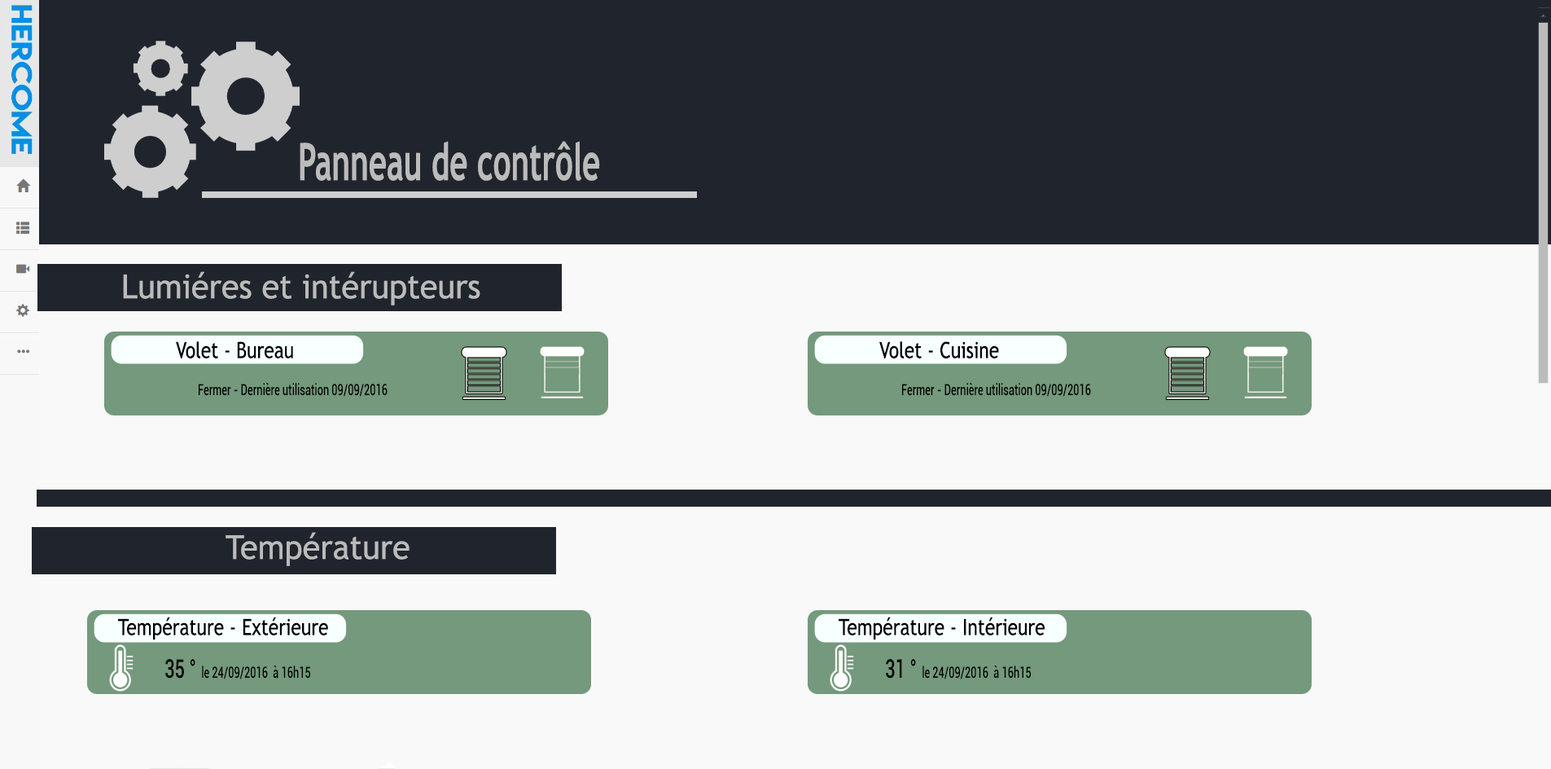
<style>
.page{position:relative;width:1551px;height:769px;background:#f9f9f9}
.page>*{position:absolute;margin:0}
.t1{font:51.5px "TrebuchetMS-Bold";color:#bbbbbb;scale:0.61 1}
.t2{font:33.2px "TrebuchetMS";color:#bbbbbb}
.t3{font:22.4px "TrebuchetMS";color:#000000;scale:0.83 1}
.t4{font:15.2px "Roboto-Medium";color:#000000;scale:0.69 1}
.t5{font:26.1px "Roboto-Medium";color:#000000;scale:0.69 1}
</style>
<div class="page">
<p class="t1" style="left:300px;top:141px;width:300px;height:40px">Panneau de contrôle</p>
<p class="t2" style="left:123px;top:271px;width:357px;height:34px">Lumiéres et intérupteurs</p>
<p class="t3" style="left:176px;top:341px;width:117px;height:17px">Volet - Bureau</p>
<p class="t3" style="left:879px;top:341px;width:120px;height:17px">Volet - Cuisine</p>
<p class="t4" style="left:199px;top:383px;width:189px;height:14px">Fermer - Dernière utilisation 09/09/2016</p>
<p class="t4" style="left:902px;top:383px;width:189px;height:14px">Fermer - Dernière utilisation 09/09/2016</p>
<p class="t2" style="left:226px;top:532px;width:184px;height:34px">Température</p>
<p class="t3" style="left:118px;top:616px;width:210px;height:24px">Température - Extérieure</p>
<p class="t3" style="left:839px;top:616px;width:206px;height:24px">Température - Intérieure</p>
<p class="t4" style="left:165px;top:659px;width:145px;height:20px"><span class="t5">35 °</span>  le 24/09/2016  à 16h15</p>
<p class="t4" style="left:886px;top:659px;width:145px;height:20px"><span class="t5">31 °</span>  le 24/09/2016  à 16h15</p>
</div>
